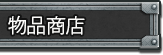
<style>
.page{position:relative;width:163px;height:55px}
.page>*{position:absolute;margin:0}
.t1{font:20px "GothicMB101Pr6N-Light";color:#fbfbf9}
</style>
<div class="page">
<p class="t1" style="left:8px;top:15px;width:77px;height:20px">物品商店</p>
</div>
